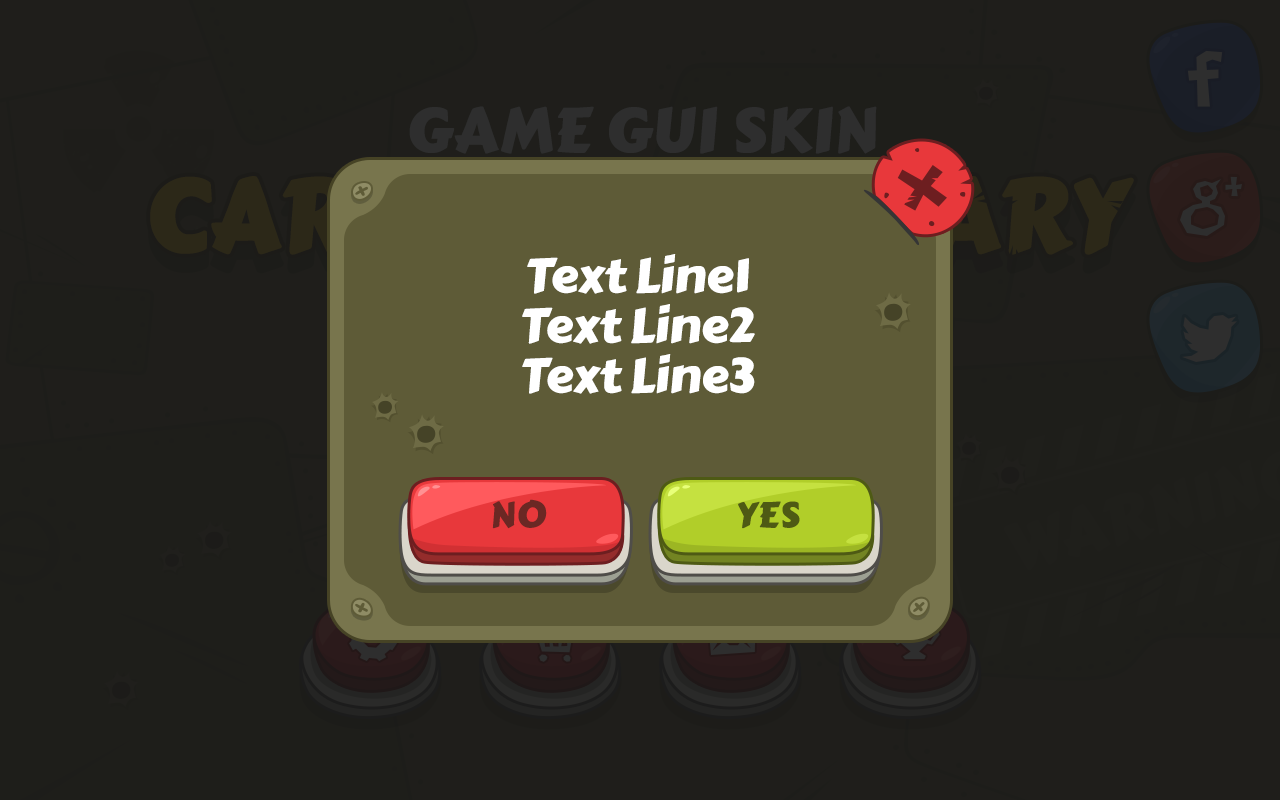
<style>
.page{position:relative;width:1280px;height:800px;background:#1f1e1b}
.page>*{position:absolute;margin:0}
.t1{font:47.5px/50px "CarterOne";letter-spacing:-0.025em;color:#ffffff;scale:1.06 1}
.t2{font:35.2px "CarterOne";letter-spacing:-0.025em;color:#6b2824;text-transform:uppercase;font-weight:bold;scale:1.05 1}
.t3{font:35.2px "CarterOne";letter-spacing:-0.025em;color:#4e5a14;text-transform:uppercase;font-weight:bold;scale:1.05 1}
</style>
<div class="page">
<p class="t1" style="left:522px;top:254px;width:233px;height:140px;text-align:center">Text Line1<br>Text Line2<br>Text Line3</p>
<p class="t2" style="left:492px;top:499px;width:55px;height:30px">no</p>
<p class="t3" style="left:738px;top:501px;width:62px;height:28px">yes</p>
</div>
